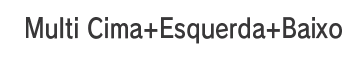
<style>
.page{position:relative;width:342px;height:60px;background:#ffffff}
.page>*{position:absolute;margin:0}
.t1{font:26.7px "RodinPro-DB";letter-spacing:0.008em;color:#383738;scale:0.84 1}
</style>
<div class="page">
<p class="t1" style="left:26px;top:17px;width:316px;height:27px">Multi Cima+Esquerda+Baixo</p>
</div>
